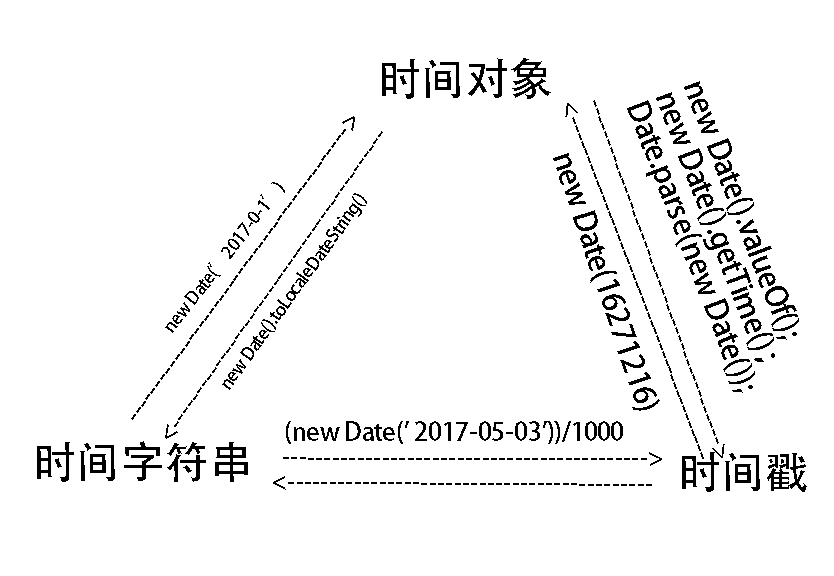
<style>
.page{position:relative;width:834px;height:576px;background:#ffffff}
.page>*{position:absolute;margin:0}
.t1{font:43.4px "AdobeHeitiStd-Regular";color:#000000}
.t2{font:30.1px/30.1px "AdobeHeitiStd-Regular";color:#000000}
.t3{font:23.1px "AdobeHeitiStd-Regular";color:#000000}
.t4{font:30.2px "AdobeHeitiStd-Regular";color:#000000}
.t5{font:17.5px "AdobeHeitiStd-Regular";color:#000000}
.t6{font:25.1px "AdobeHeitiStd-Regular";color:#000000}
.t7{font:22.9px "AdobeHeitiStd-Regular";color:#000000}
</style>
<div class="page">
<p class="t1" style="left:382px;top:58px;width:169px;height:41px">时间对象</p>
<p class="t2" style="left:627px;top:81px;width:172px;height:312px;rotate:69deg">new Date().valueOf();<br>new Date().getTime()；<br>Date.parse(new Date());</p>
<p class="t3" style="left:131px;top:116px;width:224px;height:304px;rotate:-54deg">--------------------------------------------&gt;</p>
<p class="t3" style="left:165px;top:131px;width:218px;height:308px;rotate:125deg">--------------------------------------------&gt;</p>
<p class="t4" style="left:553px;top:153px;width:107px;height:258px;rotate:71deg">new Date(16271216)</p>
<p class="t5" style="left:165px;top:182px;width:120px;height:151px;rotate:-52deg">new Date(’2017-0-1’)</p>
<p class="t5" style="left:222px;top:193px;width:145px;height:197px;rotate:-54deg">new Date().toLocaleDateString()</p>
<p class="t6" style="left:286px;top:421px;width:337px;height:23px">(new Date(' 2017-05-03'))/1000</p>
<p class="t1" style="left:37px;top:441px;width:211px;height:41px">时间字符串</p>
<p class="t7" style="left:283px;top:452px;width:379px;height:14px">--------------------------------------------&gt;</p>
<p class="t1" style="left:682px;top:452px;width:125px;height:40px">时间戳</p>
<p class="t7" style="left:273px;top:476px;width:379px;height:14px;rotate:-180deg">--------------------------------------------&gt;</p>
</div>
